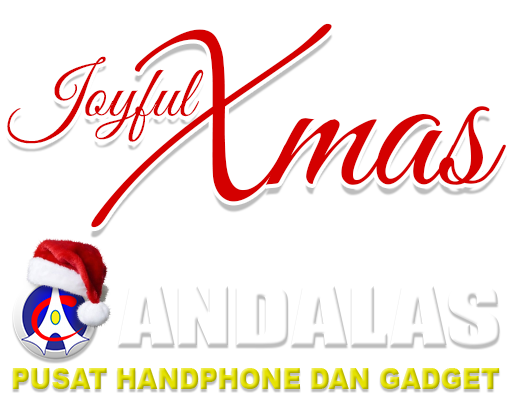
<style>
.page{position:relative;width:512px;height:406px;background:#ffffff}
.page>*{position:absolute;margin:0}
.t1{font:196px "GreatVibes-Regular";color:#d50000}
.t2{font:73.6px "GreatVibes-Regular";color:#d50000}
.t3{font:28.7px "Arial-Black";color:#e5e200;scale:0.9 1}
</style>
<div class="page">
<p class="t1" style="left:91px;top:23px;width:415px;height:205px">Xmas</p>
<p class="t2" style="left:7px;top:56px;width:197px;height:88px">Joyful</p>
<p class="t3" style="left:12px;top:368px;width:488px;height:21px">PUSAT HANDPHONE DAN GADGET</p>
</div>
